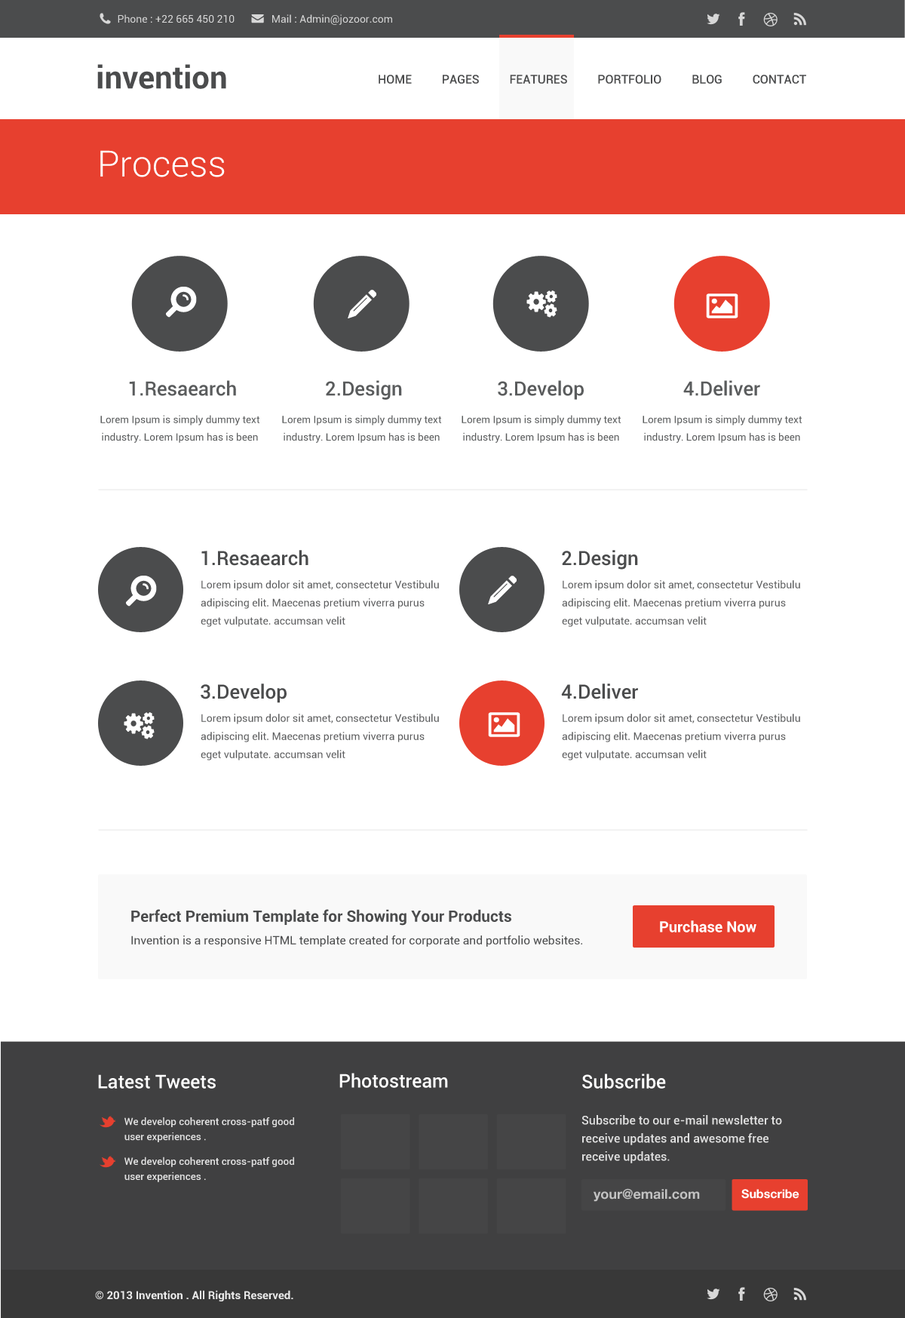
<style>
.page{position:relative;width:905px;height:1318px;background:#ffffff}
.page>*{position:absolute;margin:0}
.t1{font:10.6px "Roboto-Regular";color:#d7d7d7}
.t2{font:12.1px "Roboto-Medium";color:#4b4c4d}
.t3{font:36.2px "Roboto-Light";color:#ffffff}
.t4{font:19.6px "Roboto-Medium";color:#5a5c5d}
.t5{font:10.1px/17.4px "Roboto-Regular";color:#5a5c5d}
.t6{font:19.6px "Roboto-Medium";color:#4b4c4d}
.t7{font:10.6px/18.1px "Roboto-Regular";color:#5c5d5e}
.t8{font:11.8px/22.6px "Roboto-Regular";color:#4b4c4d}
.t9{font:15.7px/22.6px "Roboto-Bold";color:#4b4c4d}
.t10{font:15.1px "Roboto-Bold";color:#ffffff}
.t11{font:18.9px "Roboto-Medium";color:#ffffff}
.t12{font:12.1px/18.1px "Roboto-Medium";color:#e1e1e1}
.t13{font:18.9px/21.6px "Roboto-Medium";color:#ffffff}
.t14{font:10.1px/15.2px "Roboto-Medium";color:#e1e1e1}
.t15{font:18.1px/5.1px "Roboto-Bold";color:#ffffff}
.t16{font:13.6px "HelveticaNeue-Bold";color:#c2c2c2}
.t17{font:12.1px "HelveticaNeue-Bold";color:#ffffff}
.t18{font:11.3px "Roboto-Bold";color:#eaeaea}
</style>
<div class="page">
<p class="t1" style="left:118px;top:14px;width:274px;height:11px">Phone : +22 665 450 210              Mail : Admin@jozoor.com</p>
<p class="t2" style="left:379px;top:75px;width:427px;height:9px">HOME          PAGES          FEATURES          PORTFOLIO          BLOG          CONTACT</p>
<p class="t3" style="left:100px;top:150px;width:125px;height:27px">Process</p>
<p class="t4" style="left:129px;top:380px;width:107px;height:16px">1.Resaearch</p>
<p class="t4" style="left:326px;top:380px;width:76px;height:20px">2.Design</p>
<p class="t4" style="left:498px;top:380px;width:86px;height:20px">3.Develop</p>
<p class="t4" style="left:683px;top:380px;width:77px;height:16px">4.Deliver</p>
<p class="t5" style="left:100px;top:415px;width:160px;height:28px;text-align:center">Lorem Ipsum is simply dummy text industry. Lorem Ipsum has is been</p>
<p class="t5" style="left:282px;top:415px;width:160px;height:28px;text-align:center">Lorem Ipsum is simply dummy text industry. Lorem Ipsum has is been</p>
<p class="t5" style="left:462px;top:415px;width:159px;height:28px;text-align:center">Lorem Ipsum is simply dummy text industry. Lorem Ipsum has is been</p>
<p class="t5" style="left:643px;top:415px;width:159px;height:28px;text-align:center">Lorem Ipsum is simply dummy text industry. Lorem Ipsum has is been</p>
<p class="t6" style="left:201px;top:550px;width:107px;height:16px">1.Resaearch</p>
<p class="t6" style="left:562px;top:550px;width:76px;height:19px">2.Design</p>
<p class="t7" style="left:201px;top:580px;width:238px;height:47px">Lorem ipsum dolor sit amet, consectetur Vestibulu<br>adipiscing elit. Maecenas pretium viverra purus eget vulputate. accumsan velit</p>
<p class="t7" style="left:562px;top:580px;width:238px;height:47px">Lorem ipsum dolor sit amet, consectetur Vestibulu<br>adipiscing elit. Maecenas pretium viverra purus eget vulputate. accumsan velit</p>
<p class="t6" style="left:201px;top:683px;width:86px;height:20px">3.Develop</p>
<p class="t6" style="left:561px;top:683px;width:77px;height:16px">4.Deliver</p>
<p class="t7" style="left:201px;top:713px;width:238px;height:47px">Lorem ipsum dolor sit amet, consectetur Vestibulu<br>adipiscing elit. Maecenas pretium viverra purus eget vulputate. accumsan velit</p>
<p class="t7" style="left:562px;top:713px;width:238px;height:47px">Lorem ipsum dolor sit amet, consectetur Vestibulu<br>adipiscing elit. Maecenas pretium viverra purus eget vulputate. accumsan velit</p>
<p class="t8" style="left:131px;top:909px;width:451px;height:38px"><span class="t9">Perfect Premium Template for Showing Your Products<br></span>Invention is a responsive HTML template created for corporate and portfolio websites.</p>
<p class="t10" style="left:660px;top:920px;width:96px;height:12px">Purchase Now</p>
<p class="t11" style="left:98px;top:1074px;width:118px;height:14px">Latest Tweets</p>
<p class="t11" style="left:339px;top:1072px;width:109px;height:16px">Photostream</p>
<p class="t12" style="left:581px;top:1073px;width:201px;height:90px"><span class="t13">Subscribe<br><br><br><br></span>Subscribe to our e-mail newsletter to<br>receive updates and awesome free<br>receive updates.</p>
<p class="t14" style="left:124px;top:1117px;width:170px;height:65px"><span class="t15"><br>        </span>We develop coherent cross-patf good<br>        user experiences .<br><br>        We develop coherent cross-patf good<br>        user experiences .</p>
<p class="t16" style="left:594px;top:1188px;width:106px;height:13px">your@email.com</p>
<p class="t17" style="left:741px;top:1189px;width:58px;height:9px">Subscribe</p>
<p class="t18" style="left:95px;top:1290px;width:198px;height:11px">© 2013 Invention . All Rights Reserved.</p>
</div>
